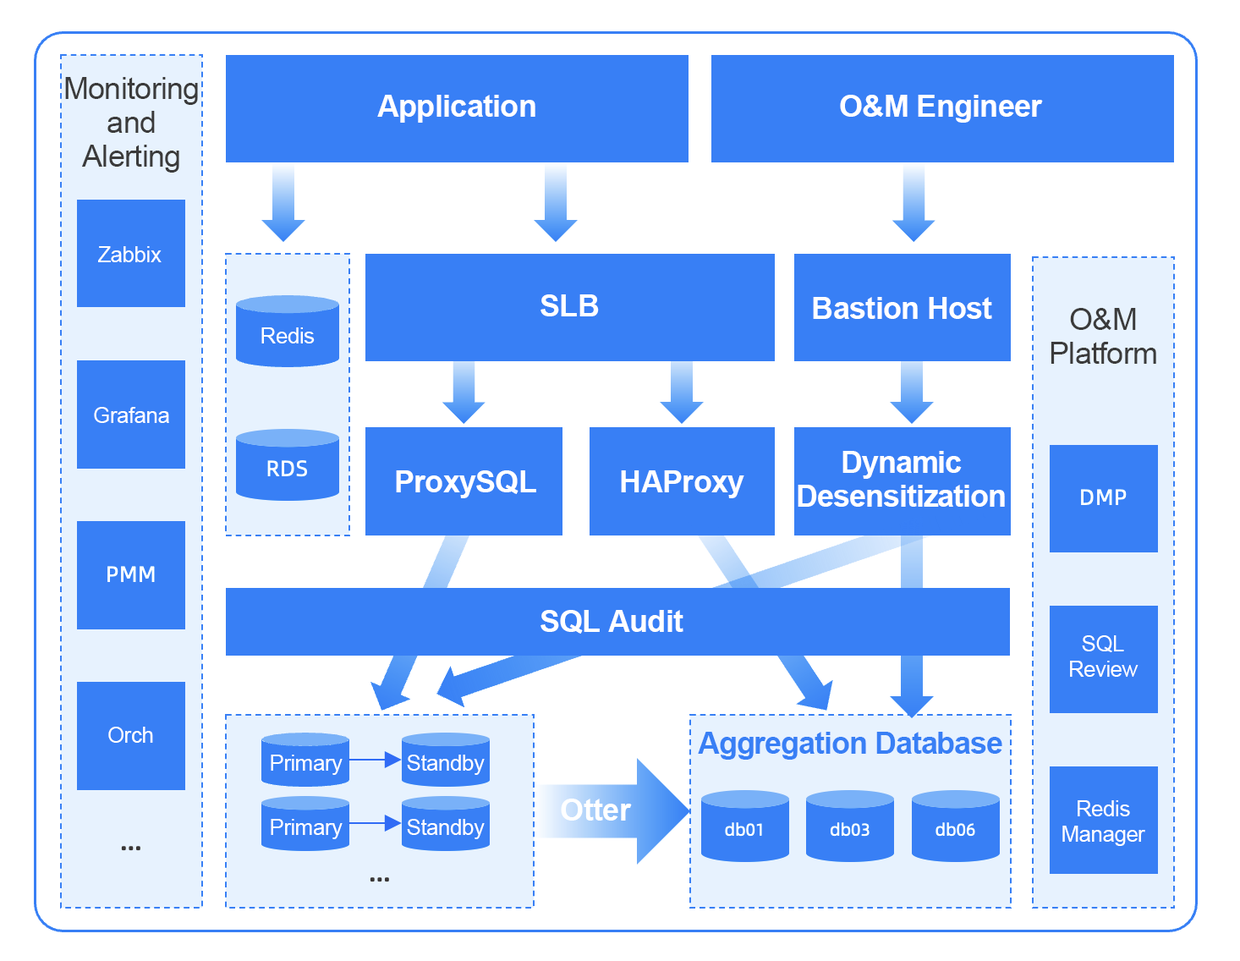
<style>
.page{position:relative;width:1240px;height:961px;background:#ffffff}
.page>*{position:absolute;margin:0}
.t1{font:30.5px/33.8px "ArialMT";letter-spacing:-0.02em;color:#3b3b3b}
.t2{font:30.5px "Arial-BoldMT";letter-spacing:-0.02em;color:#ffffff}
.t3{font:22px "ArialMT";letter-spacing:-0.02em;color:#ffffff}
.t4{font:30.5px/33.8px "Arial-BoldMT";letter-spacing:-0.03em;color:#ffffff}
.t5{font:22px/25.4px "ArialMT";letter-spacing:-0.02em;color:#ffffff}
.t6{font:30.5px "Arial-BoldMT";letter-spacing:-0.03em;color:#387ff5}
</style>
<div class="page">
<p class="t1" style="left:65px;top:77px;width:133px;height:96px;text-align:center">Monitoring and Alerting</p>
<p class="t2" style="left:377px;top:95px;width:159px;height:28px">Application</p>
<p class="t2" style="left:840px;top:95px;width:203px;height:28px">O&amp;M Engineer</p>
<p class="t3" style="left:98px;top:246px;width:64px;height:16px">Zabbix</p>
<p class="t2" style="left:541px;top:294px;width:58px;height:22px">SLB</p>
<p class="t2" style="left:813px;top:297px;width:180px;height:22px">Bastion Host</p>
<p class="t1" style="left:1051px;top:308px;width:106px;height:56px;text-align:center">O&amp;M Platform</p>
<p class="t3" style="left:261px;top:327px;width:54px;height:17px">Redis</p>
<p class="t3" style="left:94px;top:407px;width:75px;height:16px">Grafana</p>
<p class="t4" style="left:798px;top:451px;width:207px;height:56px;text-align:center">Dynamic Desensitization</p>
<p class="t2" style="left:396px;top:470px;width:140px;height:28px">ProxySQL</p>
<p class="t2" style="left:621px;top:470px;width:124px;height:28px">HAProxy</p>
<p class="t2" style="left:541px;top:610px;width:143px;height:24px">SQL Audit</p>
<p class="t5" style="left:1070px;top:635px;width:69px;height:42px;text-align:center">SQL Review</p>
<p class="t3" style="left:108px;top:727px;width:45px;height:16px">Orch</p>
<p class="t6" style="left:698px;top:732px;width:305px;height:28px">Aggregation Database</p>
<p class="t3" style="left:271px;top:755px;width:72px;height:20px">Primary</p>
<p class="t3" style="left:407px;top:755px;width:78px;height:20px">Standby</p>
<p class="t2" style="left:561px;top:799px;width:71px;height:22px">Otter</p>
<p class="t5" style="left:1063px;top:800px;width:83px;height:46px;text-align:center">Redis Manager</p>
<p class="t3" style="left:271px;top:819px;width:72px;height:20px">Primary</p>
<p class="t3" style="left:407px;top:819px;width:78px;height:20px">Standby</p>
</div>
